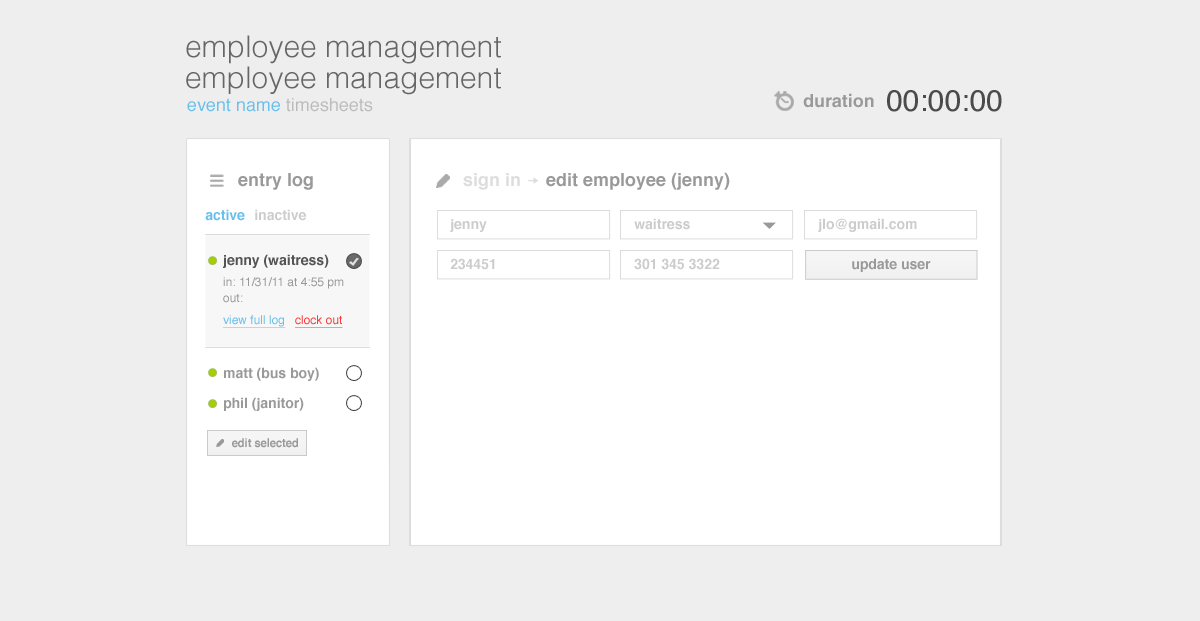
<style>
.page{position:relative;width:1200px;height:621px;background:#eeeeee}
.page>*{position:absolute;margin:0}
.t1{font:30px "HelveticaLTStd-Light";color:#666666}
.t2{font:30px "Helvetica-Light";color:#666666}
.t3{font:18px "Helvetica";color:#67bfec}
.t4{font:18px "Helvetica";color:#bbbbbb}
.t5{font:18px "HelveticaLTStd-Bold";color:#999999}
.t6{font:30px "Helvetica";color:#4b4b4b}
.t7{font:18px "Helvetica-Bold";color:#999999}
.t8{font:18px "Helvetica-Bold";color:#dddddd}
.t9{font:14px "Helvetica-Bold";color:#67bfec}
.t10{font:14px "Helvetica-Bold";color:#cccccc}
.t11{font:14px "Helvetica-Bold";color:#545454}
.t12{font:14px "Helvetica-Bold";color:#999999}
.t13{font:12px/16px "Helvetica";color:#999999}
.t14{font:12px/22px "Helvetica";color:#67bfec;text-decoration:underline}
.t15{font:12px/22px "Helvetica";color:#f43a3a;text-decoration:underline}
.t16{font:12.1px "Helvetica-Bold";color:#999999;scale:0.92 1}
</style>
<div class="page">
<p class="t1" style="left:186px;top:35px;width:315px;height:29px">employee management</p>
<p class="t2" style="left:186px;top:66px;width:315px;height:29px">employee management</p>
<p class="t3" style="left:187px;top:98px;width:186px;height:14px">event name <span class="t4">timesheets</span></p>
<p class="t5" style="left:803px;top:93px;width:71px;height:15px">duration</p>
<p class="t6" style="left:887px;top:90px;width:115px;height:22px">00:00:00</p>
<p class="t7" style="left:238px;top:173px;width:75px;height:17px">entry log</p>
<p class="t7" style="left:463px;top:172px;width:267px;height:18px"><span class="t8">sign in </span>    edit employee (jenny)</p>
<p class="t9" style="left:205px;top:209px;width:40px;height:12px">active</p>
<p class="t10" style="left:255px;top:209px;width:51px;height:12px">inactive</p>
<p class="t10" style="left:450px;top:219px;width:37px;height:13px">jenny</p>
<p class="t10" style="left:634px;top:218px;width:56px;height:12px">waitress</p>
<p class="t10" style="left:818px;top:218px;width:99px;height:14px">jlo@gmail.com</p>
<p class="t11" style="left:223px;top:254px;width:106px;height:14px">jenny (waitress)</p>
<p class="t10" style="left:450px;top:258px;width:45px;height:12px">234451</p>
<p class="t10" style="left:634px;top:258px;width:86px;height:12px">301 345 3322</p>
<p class="t12" style="left:852px;top:258px;width:79px;height:14px">update user</p>
<p class="t13" style="left:223px;top:277px;width:121px;height:51px">in: 11/31/11 at 4:55 pm<br>out: <br><span class="t14">view full log   </span><span class="t15">clock out</span></p>
<p class="t12" style="left:224px;top:367px;width:95px;height:14px">matt (bus boy)</p>
<p class="t12" style="left:224px;top:397px;width:80px;height:14px">phil (janitor)</p>
<p class="t16" style="left:232px;top:438px;width:66px;height:10px">edit selected</p>
</div>
